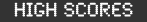
<style>
.page{position:relative;width:147px;height:22px;background:#333333}
.page>*{position:absolute;margin:0}
.t1{font:20px "SynchroLET";color:#ffffff}
</style>
<div class="page">
<p class="t1" style="left:14px;top:2px;width:119px;height:15px">HIGH SCORES</p>
</div>
